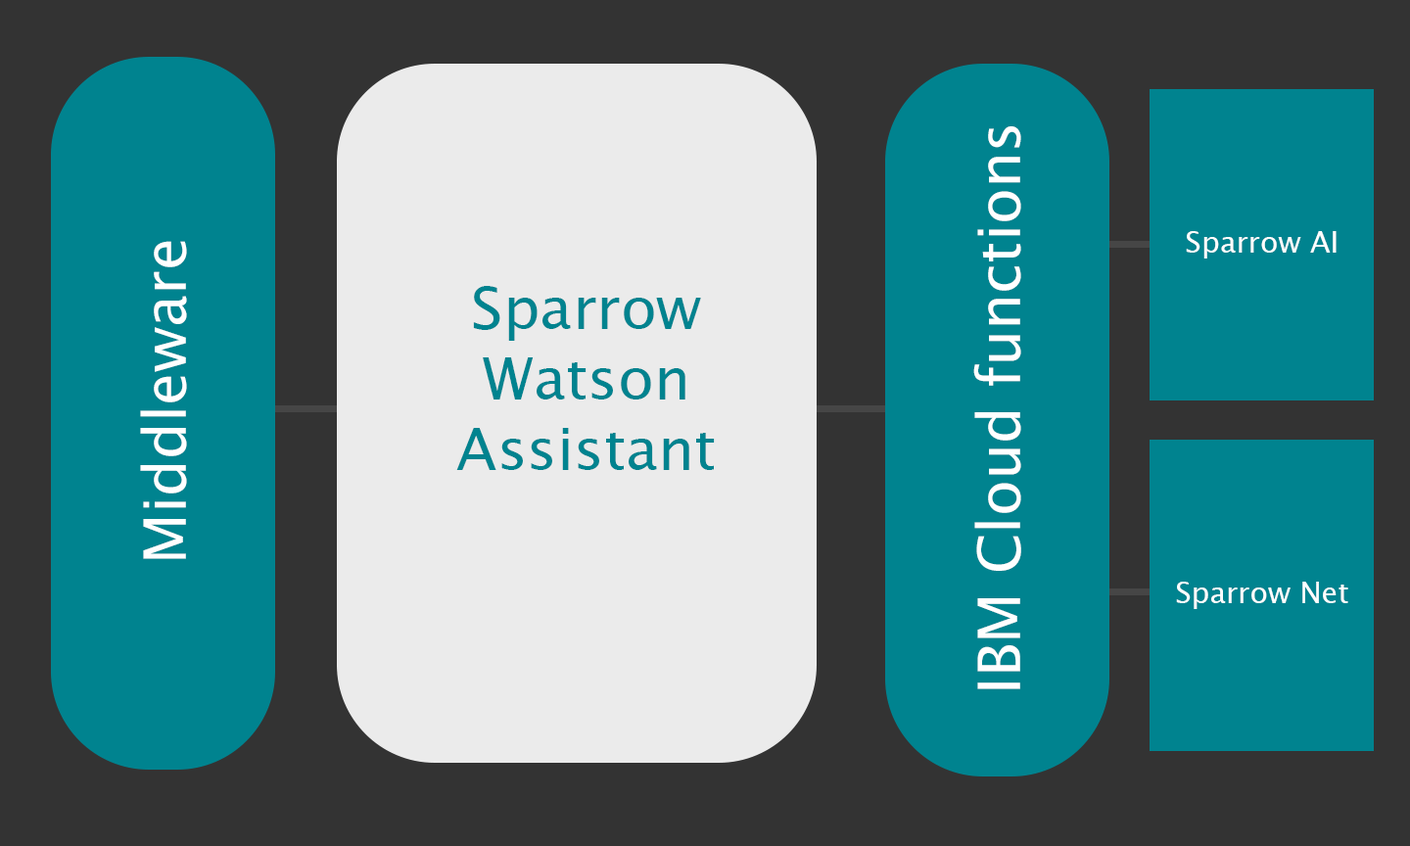
<style>
.page{position:relative;width:1410px;height:846px;background:#333333}
.page>*{position:absolute;margin:0}
.t1{font:58.7px "LucidaSansUnicode";color:#ffffff}
.t2{font:29.4px "LucidaSansUnicode";color:#ffffff}
.t3{font:58.7px "LucidaSansUnicode";color:#00838f}
</style>
<div class="page">
<p class="t1" style="left:973px;top:126px;width:48px;height:563px;rotate:-90deg">IBM Cloud functions</p>
<p class="t2" style="left:1186px;top:231px;width:150px;height:27px">Sparrow AI</p>
<p class="t1" style="left:140px;top:241px;width:47px;height:318px;rotate:-90deg">Middleware</p>
<p class="t3" style="left:456px;top:286px;width:259px;height:184px;text-align:center">Sparrow Watson <br>Assistant</p>
<p class="t2" style="left:1176px;top:582px;width:172px;height:27px">Sparrow Net</p>
</div>
